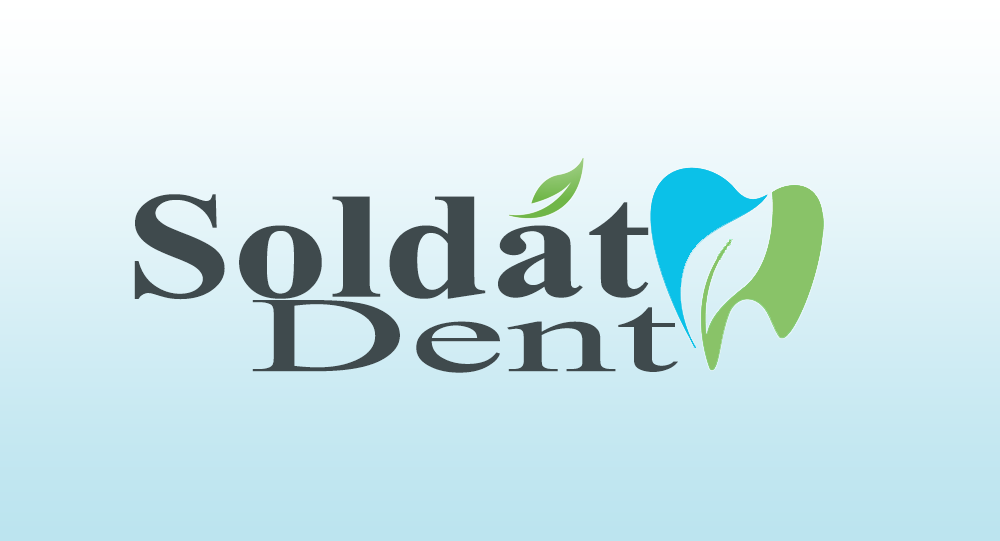
<style>
.page{position:relative;width:1000px;height:541px}
.page>*{position:absolute;margin:0}
.t1{font:151.2px "TimesNewRomanPS-BoldMT";color:#3f4a4d;scale:1.28 1}
.t2{font:107.2px "TimesNewRomanPSMT";color:#3f4a4d;scale:2.06 1}
</style>
<div class="page">
<p class="t1" style="left:134px;top:194px;width:515px;height:106px">Soldat</p>
<p class="t2" style="left:252px;top:300px;width:426px;height:73px">Dent</p>
</div>
